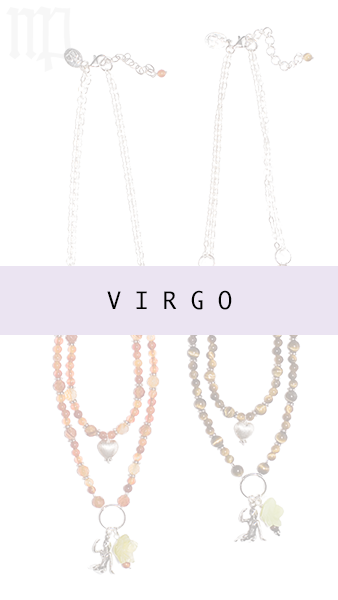
<style>
.page{position:relative;width:338px;height:600px;background:#ffffff}
.page>*{position:absolute;margin:0}
.t1{font:23.3px "Ayuthaya";color:#000000}
</style>
<div class="page">
<p class="t1" style="left:107px;top:290px;width:125px;height:20px">V I R G O</p>
</div>
